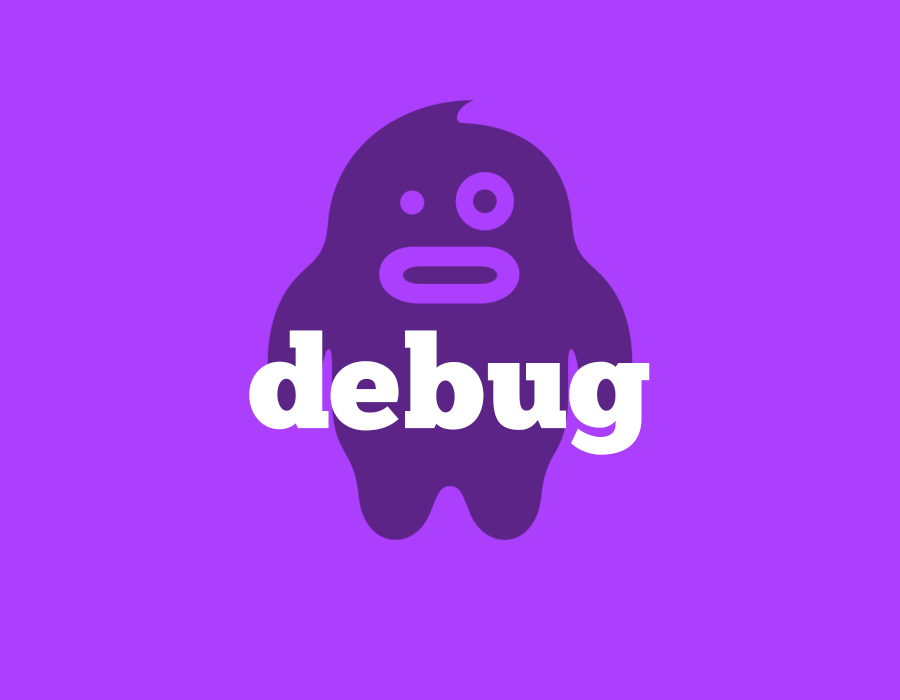
<style>
.page{position:relative;width:900px;height:700px;background:#ac3ffe}
.page>*{position:absolute;margin:0}
.t1{font:129.9px "ChunkFive-Roman";color:#ffffff}
</style>
<div class="page">
<p class="t1" style="left:249px;top:330px;width:401px;height:125px">debug</p>
</div>
